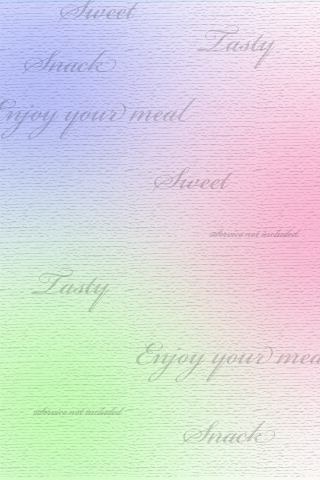
<style>
.page{position:relative;width:320px;height:480px}
.page>*{position:absolute;margin:0}
.t1{font:48px "BickhamScriptPro-Regular";color:#c7bbca}
.t2{font:48px "BickhamScriptPro-Regular";color:#9da2ce}
.t3{font:48px "BickhamScriptPro-Regular";color:#c3abbb}
.t4{font:18px "BickhamScriptPro-Regular";color:#cba5b4}
.t5{font:48px "BickhamScriptPro-Regular";color:#b3c9b0}
.t6{font:18px "BickhamScriptPro-Regular";color:#a5d098}
.t7{font:48px "BickhamScriptPro-Regular";color:#c1cbb9}
</style>
<div class="page">
<p class="t1" style="left:196px;top:25px;width:80px;height:44px">Tasty</p>
<p class="t2" style="left:22px;top:50px;width:95px;height:26px">Snack</p>
<p class="t3" style="left:152px;top:167px;width:81px;height:26px">Sweet</p>
<p class="t4" style="left:209px;top:229px;width:93px;height:9px">Service not included</p>
<p class="t5" style="left:30px;top:268px;width:80px;height:44px">Tasty</p>
<p class="t6" style="left:33px;top:407px;width:93px;height:9px">Service not included</p>
<p class="t7" style="left:181px;top:421px;width:95px;height:26px">Snack</p>
</div>
